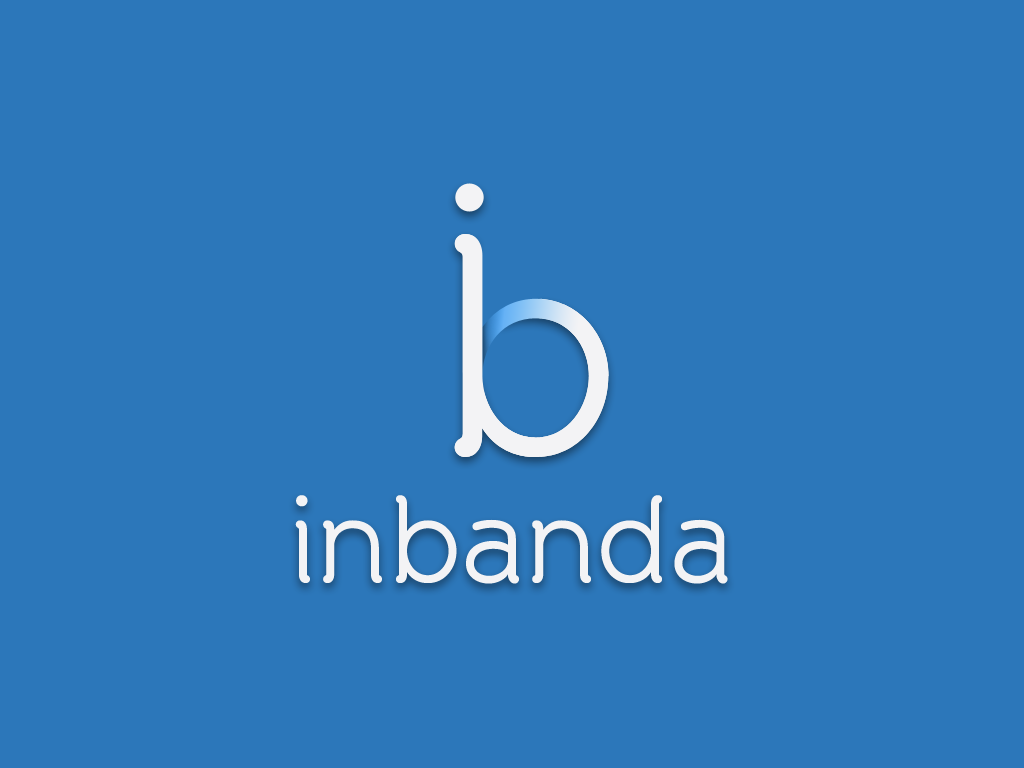
<style>
.page{position:relative;width:1024px;height:768px;background:#2c77ba}
.page>*{position:absolute;margin:0}
.t1{font:120px "BandaRegular";letter-spacing:-0.005em;color:#f3f3f5}
</style>
<div class="page">
<p class="t1" style="left:295px;top:495px;width:433px;height:89px">inbanda</p>
</div>
